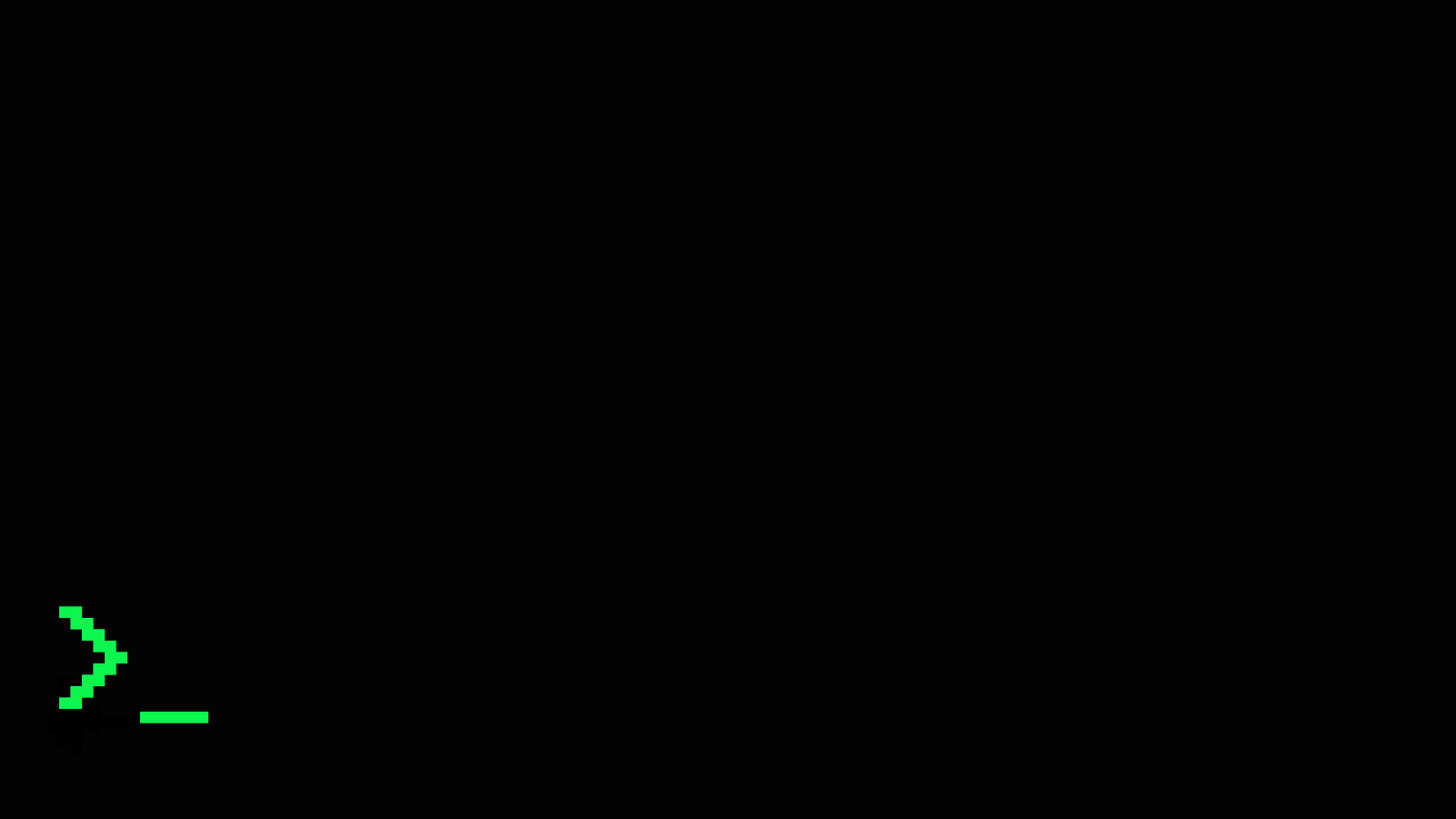
<style>
.page{position:relative;width:1456px;height:819px;background:#040204}
.page>*{position:absolute;margin:0}
.t1{font:182px "Windows-Command-Prompt";color:#0cf64e}
</style>
<div class="page">
<p class="t1" style="left:59px;top:606px;width:68px;height:103px">&gt;</p>
<p class="t1" style="left:140px;top:712px;width:68px;height:11px">_</p>
</div>
